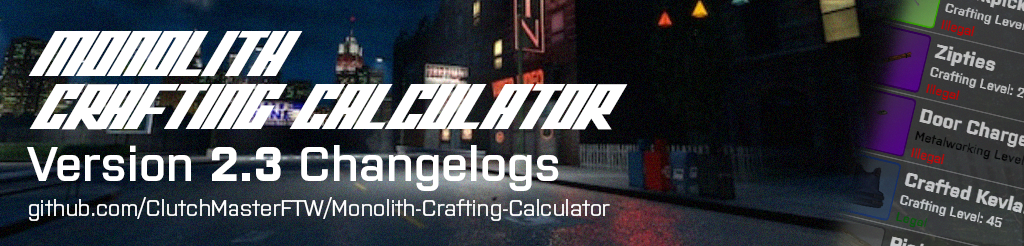
<style>
.page{position:relative;width:1024px;height:246px}
.page>*{position:absolute;margin:0}
.t1{font:64.7px/53.2px "HypikRegular";color:#ffffff;scale:0.62 1}
.t2{font:49.2px "Purista-SemiBold";color:#ffffff}
.t3{font:49.2px "Purista-Bold";color:#ffffff}
.t4{font:22.7px "Purista-Medium";color:#ffffff}
</style>
<div class="page">
<p class="t1" style="left:28px;top:31px;width:600px;height:99px">MONOLITH<br>CRAFTING CALCULATOR</p>
<p class="t2" style="left:27px;top:145px;width:532px;height:46px">Version <span class="t3">2.3</span> Changelogs</p>
<p class="t4" style="left:29px;top:197px;width:581px;height:24px">github.com/ClutchMasterFTW/Monolith-Crafting-Calculator</p>
</div>
